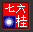
<style>
.page{position:relative;width:33px;height:32px;background:#f20000}
.page>*{position:absolute;margin:0}
.t1{font:10.4px "SimSun";color:#ffffff}
.t2{font:11.7px "SimSun";color:#ffffff}
</style>
<div class="page">
<p class="t1" style="left:5px;top:4px;width:20px;height:9px">七六</p>
<p class="t2" style="left:16px;top:15px;width:11px;height:12px">桂</p>
</div>
